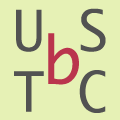
<style>
.page{position:relative;width:120px;height:120px;background:#e6f1b5}
.page>*{position:absolute;margin:0}
.t1{font:53.3px "Monaco";color:#525252}
.t2{font:64px "Monaco";color:#ba344d}
</style>
<div class="page">
<p class="t1" style="left:14px;top:8px;width:92px;height:105px">U S<br>T C</p>
<p class="t2" style="left:48px;top:33px;width:31px;height:52px">b</p>
</div>
